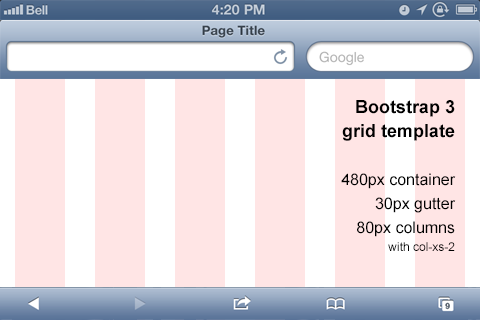
<style>
.page{position:relative;width:480px;height:320px;background:#ffe5e5}
.page>*{position:absolute;margin:0}
.t1{font:16px/24px "ArialMT";color:#000000}
.t2{font:18px/24px "Arial-BoldMT";color:#000000}
.t3{font:12px/18px "ArialMT";color:#000000}
</style>
<div class="page">
<p class="t1" style="left:341px;top:100px;width:115px;height:151px;text-align:right"><span class="t2">Bootstrap 3<br>grid template<br><br></span>480px container<br>30px gutter<br>80px columns<br><span class="t3">with col-xs-2</span></p>
</div>
